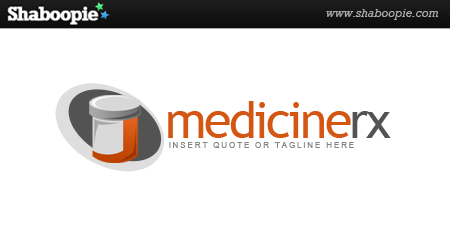
<style>
.page{position:relative;width:450px;height:250px;background:#ffffff}
.page>*{position:absolute;margin:0}
.t1{font:50px "TrebuchetMS";letter-spacing:-0.05em;color:#d35612}
.t2{font:50px "TrebuchetMS";letter-spacing:-0.05em;color:#535353}
.t3{font:8.3px "ArialMT";letter-spacing:0.2em;color:#848484}
</style>
<div class="page">
<p class="t1" style="left:168px;top:101px;width:223px;height:37px">medicine<span class="t2">rx</span></p>
<p class="t3" style="left:169px;top:142px;width:185px;height:7px">INSERT QUOTE OR TAGLINE HERE</p>
</div>
